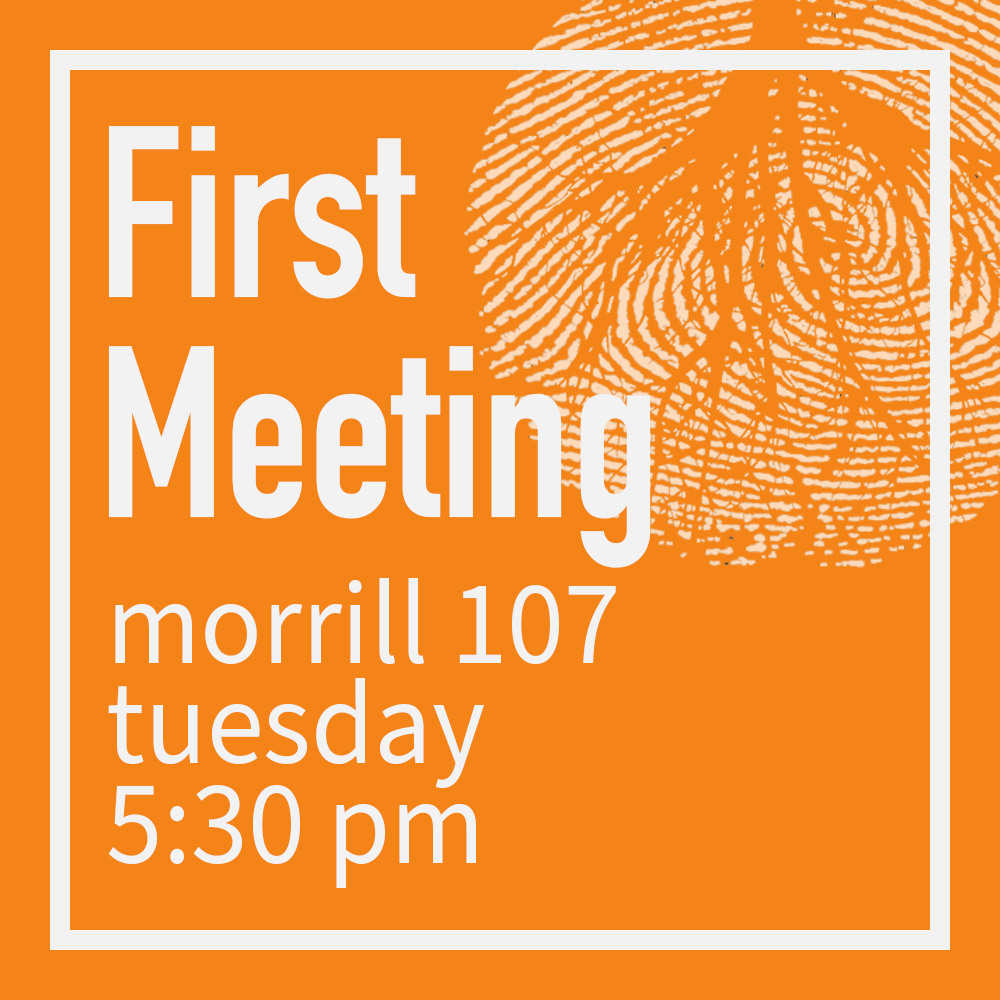
<style>
.page{position:relative;width:1000px;height:1000px;background:#f48418}
.page>*{position:absolute;margin:0}
.t1{font:240px/220px "DINCondensed-Bold";color:#f2f2f2;scale:0.95 1}
.t2{font:120px/100px "SourceSansPro-Regular";color:#f2f2f2;scale:0.95 1}
</style>
<div class="page">
<p class="t1" style="left:108px;top:126px;width:543px;height:442px">First <br>Meeting</p>
<p class="t2" style="left:108px;top:578px;width:508px;height:310px">morrill 107<br>tuesday<br>5:30 pm</p>
</div>
